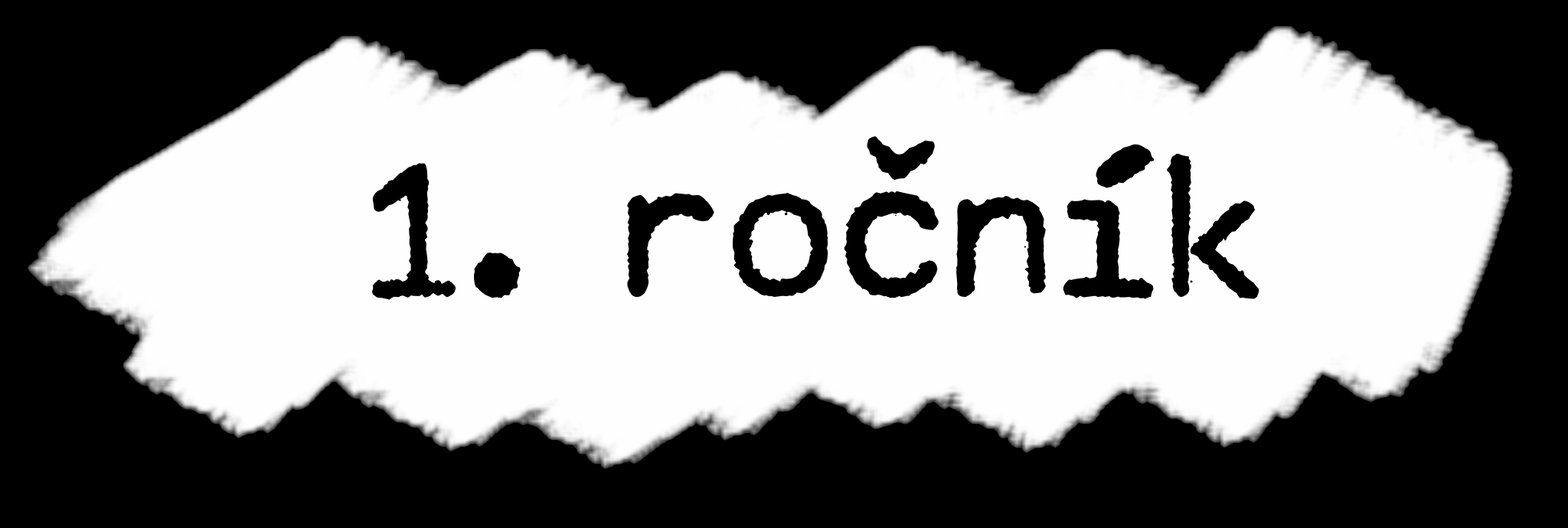
<style>
.page{position:relative;width:1568px;height:528px;background:#000000}
.page>*{position:absolute;margin:0}
.t1{font:183.7px "MODERNTYPEWRITER";color:#000000}
</style>
<div class="page">
<p class="t1" style="left:372px;top:136px;width:887px;height:164px">1. ročník</p>
</div>
